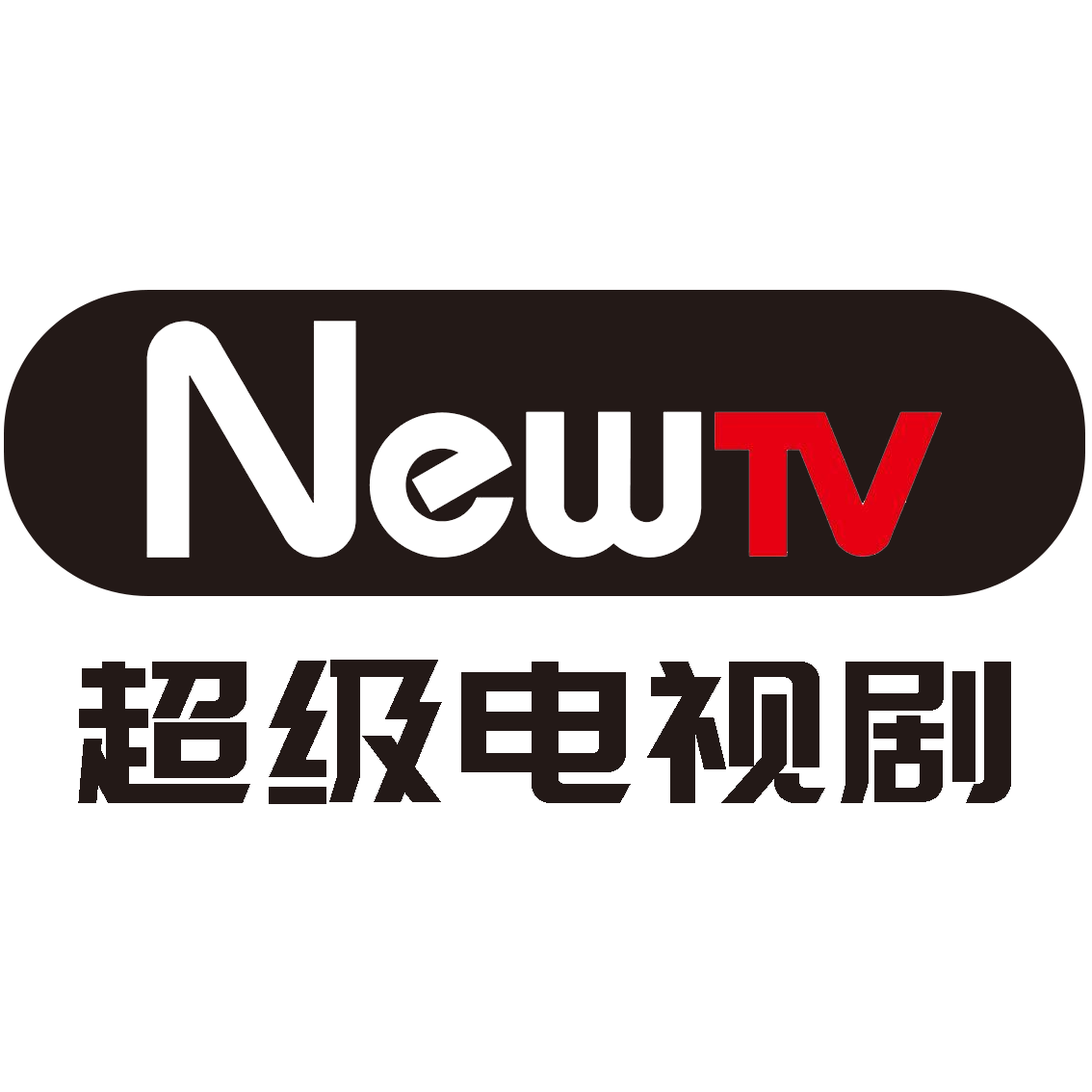
<style>
.page{position:relative;width:1092px;height:1092px;background:#ffffff}
.page>*{position:absolute;margin:0}
.t1{font:196.4px "PangMenZhengDao";letter-spacing:0.01em;color:#231917}
</style>
<div class="page">
<p class="t1" style="left:78px;top:660px;width:933px;height:144px">超级电视剧</p>
</div>
